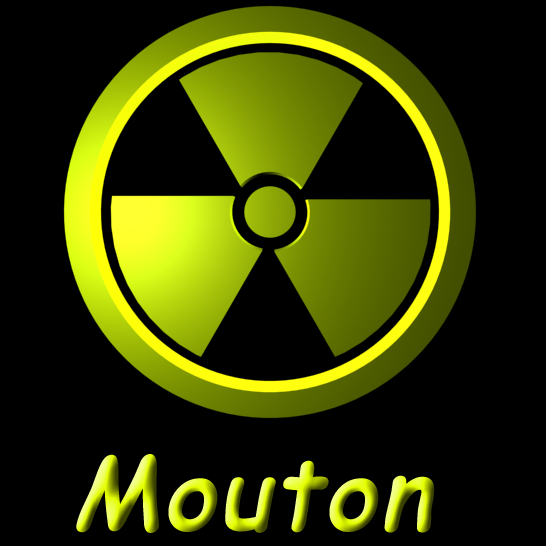
<style>
.page{position:relative;width:546px;height:546px;background:#000000}
.page>*{position:absolute;margin:0}
.t1{font:100px "ComicSansMS-Bold";letter-spacing:0.03em;font-style:italic}
</style>
<div class="page">
<p class="t1" style="left:76px;top:454px;width:359px;height:79px">Mouton</p>
</div>
